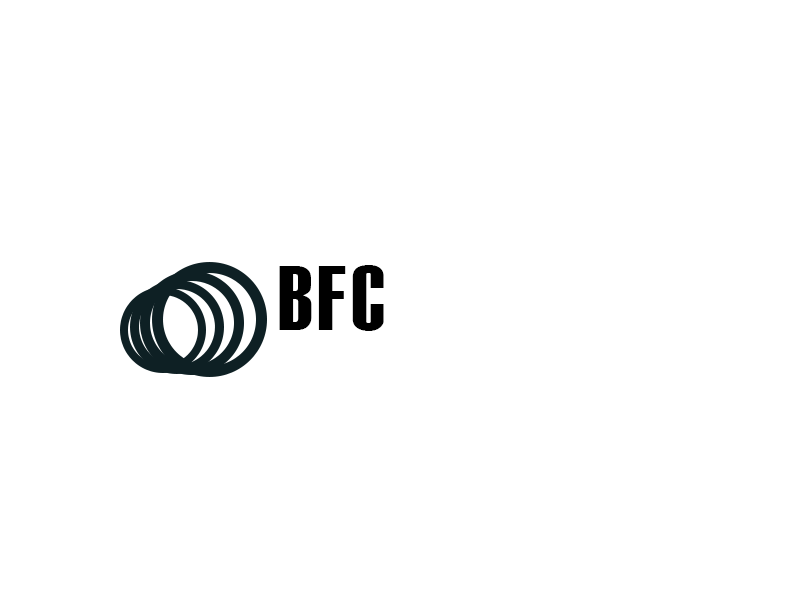
<style>
.page{position:relative;width:800px;height:600px;background:#ffffff}
.page>*{position:absolute;margin:0}
.t1{font:92px "Haettenschweiler";letter-spacing:0.05em;color:#000000}
</style>
<div class="page">
<p class="t1" style="left:279px;top:265px;width:105px;height:66px">BFC</p>
</div>
